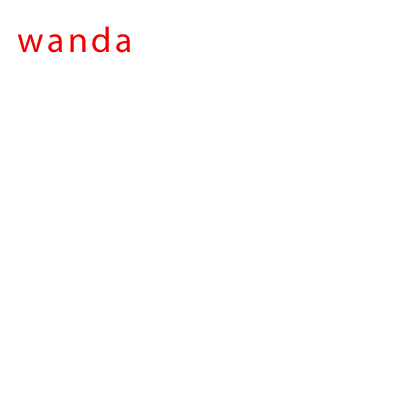
<style>
.page{position:relative;width:400px;height:400px;background:#ffffff}
.page>*{position:absolute;margin:0}
.t1{font:36px "MyriadPro-Regular";letter-spacing:0.1em;color:#f00000}
</style>
<div class="page">
<p class="t1" style="left:17px;top:26px;width:113px;height:27px">wanda</p>
</div>
